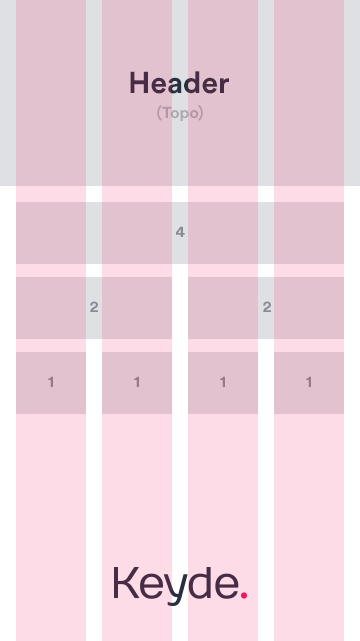
<style>
.page{position:relative;width:360px;height:641px;background:#e2c2cf}
.page>*{position:absolute;margin:0}
.t1{font:30px "CircularStd-Bold";color:#462c45}
.t2{font:16px "CircularStd-Bold"}
.t3{font:16px "CircularStd-Bold";color:#888b92;text-transform:uppercase}
.t4{font:16px "CircularStd-Bold";color:#98798a;text-transform:uppercase}
</style>
<div class="page">
<p class="t1" style="left:130px;top:71px;width:99px;height:23px">Header</p>
<p class="t2" style="left:157px;top:105px;width:46px;height:16px">(Topo)</p>
<p class="t3" style="left:176px;top:226px;width:9px;height:11px">4</p>
<p class="t3" style="left:90px;top:301px;width:8px;height:11px">2</p>
<p class="t3" style="left:263px;top:301px;width:8px;height:11px">2</p>
<p class="t4" style="left:48px;top:376px;width:5px;height:11px">1</p>
<p class="t4" style="left:134px;top:376px;width:5px;height:11px">1</p>
<p class="t4" style="left:220px;top:376px;width:5px;height:11px">1</p>
<p class="t4" style="left:306px;top:376px;width:5px;height:11px">1</p>
</div>
